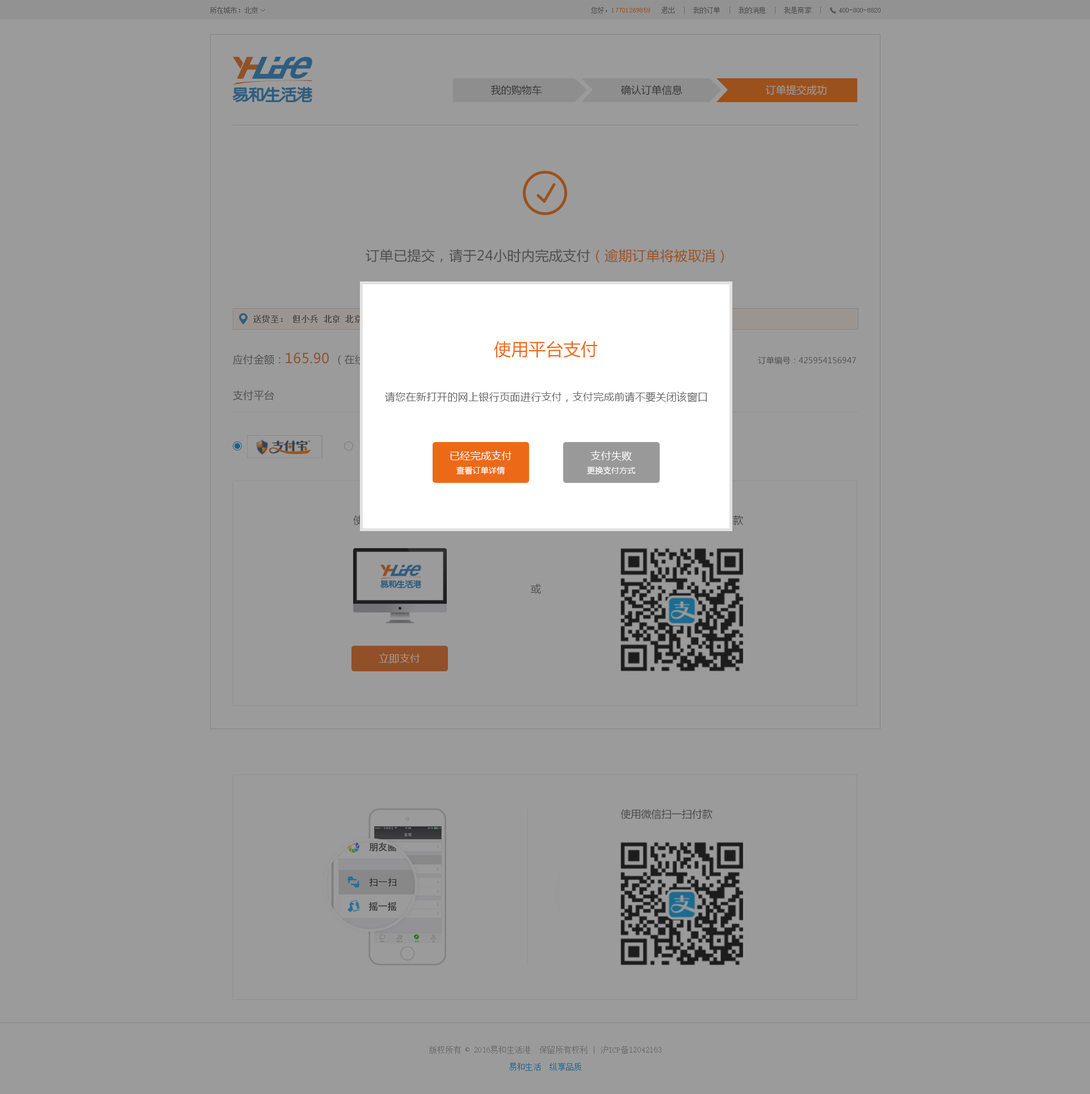
<style>
.page{position:relative;width:1090px;height:1094px;background:#9b9b9b}
.page>*{position:absolute;margin:0}
.t1{font:6.8px "SimSun";letter-spacing:0.02em;color:#666666}
.t2{font:6.8px "SimSun";letter-spacing:0.02em;color:#ff6c00}
.t3{font:6.8px "SimSun";letter-spacing:0.02em;color:#999999}
.t4{font:10.2px "MicrosoftYaHei";color:#333333}
.t5{font:10.2px "MicrosoftYaHei";color:#9b9b9b}
.t6{font:13.6px "MicrosoftYaHei";letter-spacing:0.02em;color:#666666}
.t7{font:13.6px "MicrosoftYaHei";letter-spacing:0.02em;color:#ff6c00}
.t8{font:17px "MicrosoftYaHei";letter-spacing:0.02em;color:#ec6a17}
.t9{font:7.9px "MicrosoftYaHei";letter-spacing:0.02em}
.t10{font:10.2px "MicrosoftYaHei";letter-spacing:0.02em}
.t11{font:13.6px "MicrosoftYaHei";letter-spacing:0.02em}
.t12{font:10.2px "MicrosoftYaHei";letter-spacing:0.02em;color:#666666}
.t13{font:10.2px/13.6px "MicrosoftYaHei";letter-spacing:0.02em;color:#ffffff}
.t14{font:7.9px/13.6px "MicrosoftYaHei";letter-spacing:0.02em;color:#ffffff}
.t15{font:10.2px "MicrosoftYaHei";color:#595959}
.t16{font:10.2px "MicrosoftYaHei";letter-spacing:0.02em;color:#9b9b9b}
.t17{font:7.9px/17px "SimSun";letter-spacing:0.02em;color:#686868}
</style>
<div class="page">
<p class="t1" style="left:210px;top:7px;width:48px;height:7px">所在城市：北京</p>
<p class="t1" style="left:261px;top:9px;width:4px;height:2px">&gt;</p>
<p class="t2" style="left:591px;top:7px;width:230px;height:7px"><span class="t1">您好，</span>17701269859<span class="t1">   退出</span><span class="t3">  |  </span><span class="t1">我的订单</span><span class="t3">  |  </span><span class="t1">我的消息</span><span class="t3">  |  </span><span class="t1">我是商家</span><span class="t3">  |</span></p>
<p class="t1" style="left:839px;top:8px;width:41px;height:4px">400-800-8820</p>
<p class="t4" style="left:491px;top:85px;width:51px;height:10px">我的购物车</p>
<p class="t4" style="left:620px;top:85px;width:62px;height:10px">确认订单信息</p>
<p class="t5" style="left:765px;top:85px;width:61px;height:10px">订单提交成功</p>
<p class="t6" style="left:366px;top:249px;width:358px;height:14px">订单已提交，请于24小时内完成支付<span class="t7">（逾期订单将被取消）</span></p>
<p class="t8" style="left:494px;top:341px;width:103px;height:17px">使用平台支付</p>
<p class="t9" style="left:233px;top:352px;width:623px;height:14px"><span class="t10">应付金额：</span><span class="t11">165.90 </span><span class="t10">（在线支付）                                                                                                                </span>订单编号：425954156947</p>
<p class="t12" style="left:233px;top:390px;width:41px;height:11px">支付平台</p>
<p class="t12" style="left:385px;top:392px;width:322px;height:10px">请您在新打开的网上银行页面进行支付，支付完成前请不要关闭该窗口</p>
<p class="t13" style="left:450px;top:451px;width:61px;height:24px;text-align:center">已经完成支付<br><span class="t14">查看订单详情</span></p>
<p class="t14" style="left:587px;top:451px;width:48px;height:24px;text-align:center"><span class="t13">支付失败<br></span>更换支付方式</p>
<p class="t15" style="left:531px;top:584px;width:10px;height:10px">或</p>
<p class="t16" style="left:379px;top:653px;width:41px;height:10px">立即支付</p>
<p class="t15" style="left:620px;top:809px;width:92px;height:11px">使用微信扫一扫付款</p>
<p class="t17" style="left:429px;top:1046px;width:232px;height:25px;text-align:center">版权所有 © 2016易和生活港  保留所有权利 | 沪ICP备12042163<br>易和生活  纵享品质</p>
</div>
